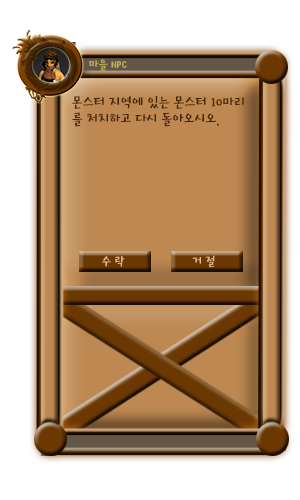
<style>
.page{position:relative;width:300px;height:500px;background:#ffffff}
.page>*{position:absolute;margin:0}
.t1{font:12px "HoonMakdR";color:#bdaf51}
.t2{font:14px "HoonMakdR";color:#472500}
.t3{font:12px "HoonMakdR";color:#e2b88c}
</style>
<div class="page">
<p class="t1" style="left:89px;top:59px;width:38px;height:12px">마을 NPC</p>
<p class="t2" style="left:72px;top:96px;width:172px;height:31px">몬스터 지역에 있는 몬스터 10마리<br>를 처치하고 다시 돌아오시오.</p>
<p class="t3" style="left:102px;top:256px;width:23px;height:11px">수 락</p>
<p class="t3" style="left:192px;top:255px;width:23px;height:13px">거 절</p>
</div>
